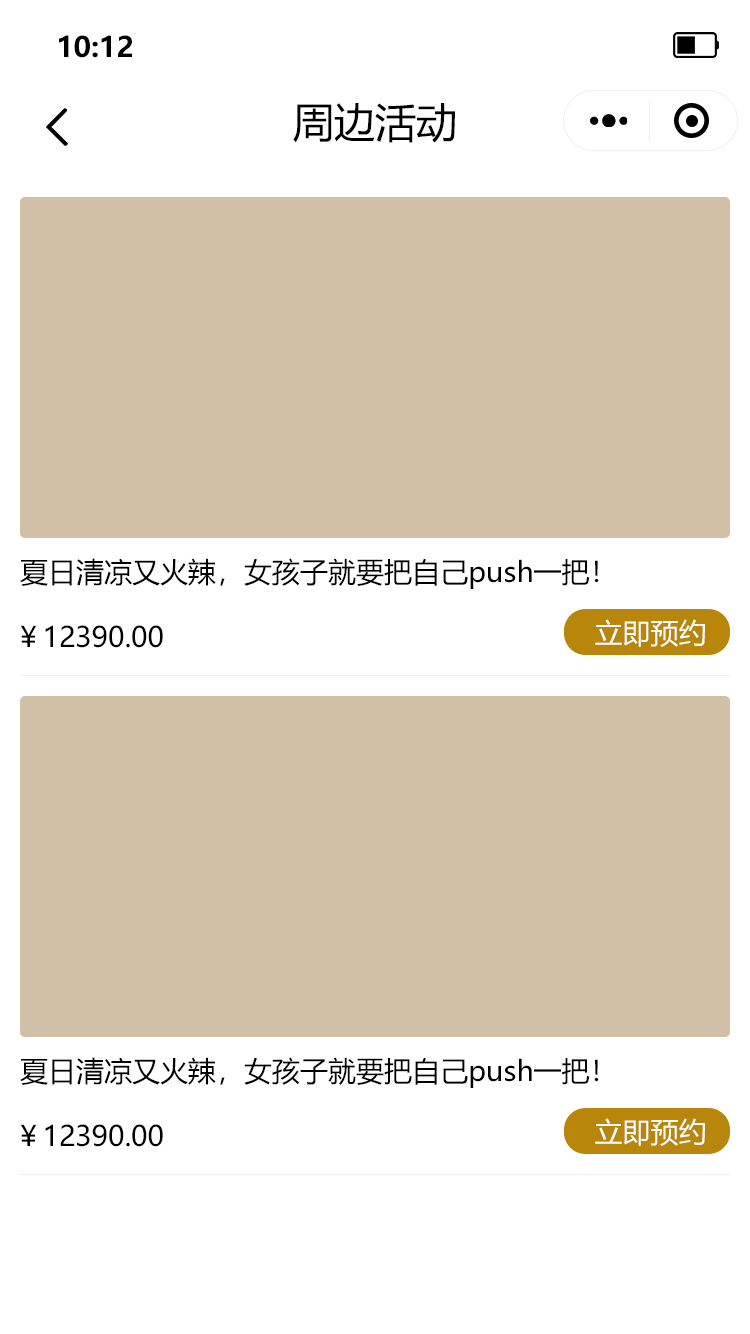
<style>
.page{position:relative;width:750px;height:1334px;background:#d1c0a5}
.page>*{position:absolute;margin:0}
.t1{font:28.1px "MicrosoftYaHei-Bold";color:#000000}
.t2{font:41px "MicrosoftYaHei";color:#000000}
.t3{font:28px "MicrosoftYaHei";color:#000000}
.t4{font:28px "MicrosoftYaHei";color:#ffffff}
</style>
<div class="page">
<p class="t1" style="left:59px;top:35px;width:73px;height:23px">10:12</p>
<p class="t2" style="left:293px;top:103px;width:162px;height:40px">周边活动</p>
<p class="t3" style="left:20px;top:558px;width:579px;height:31px">夏日清凉又火辣，女孩子就要把自己push一把！</p>
<p class="t3" style="left:20px;top:625px;width:143px;height:23px">￥12390.00</p>
<p class="t4" style="left:595px;top:619px;width:110px;height:28px">立即预约</p>
<p class="t3" style="left:20px;top:1057px;width:579px;height:31px">夏日清凉又火辣，女孩子就要把自己push一把！</p>
<p class="t4" style="left:595px;top:1118px;width:110px;height:28px">立即预约</p>
<p class="t3" style="left:20px;top:1124px;width:143px;height:23px">￥12390.00</p>
</div>
